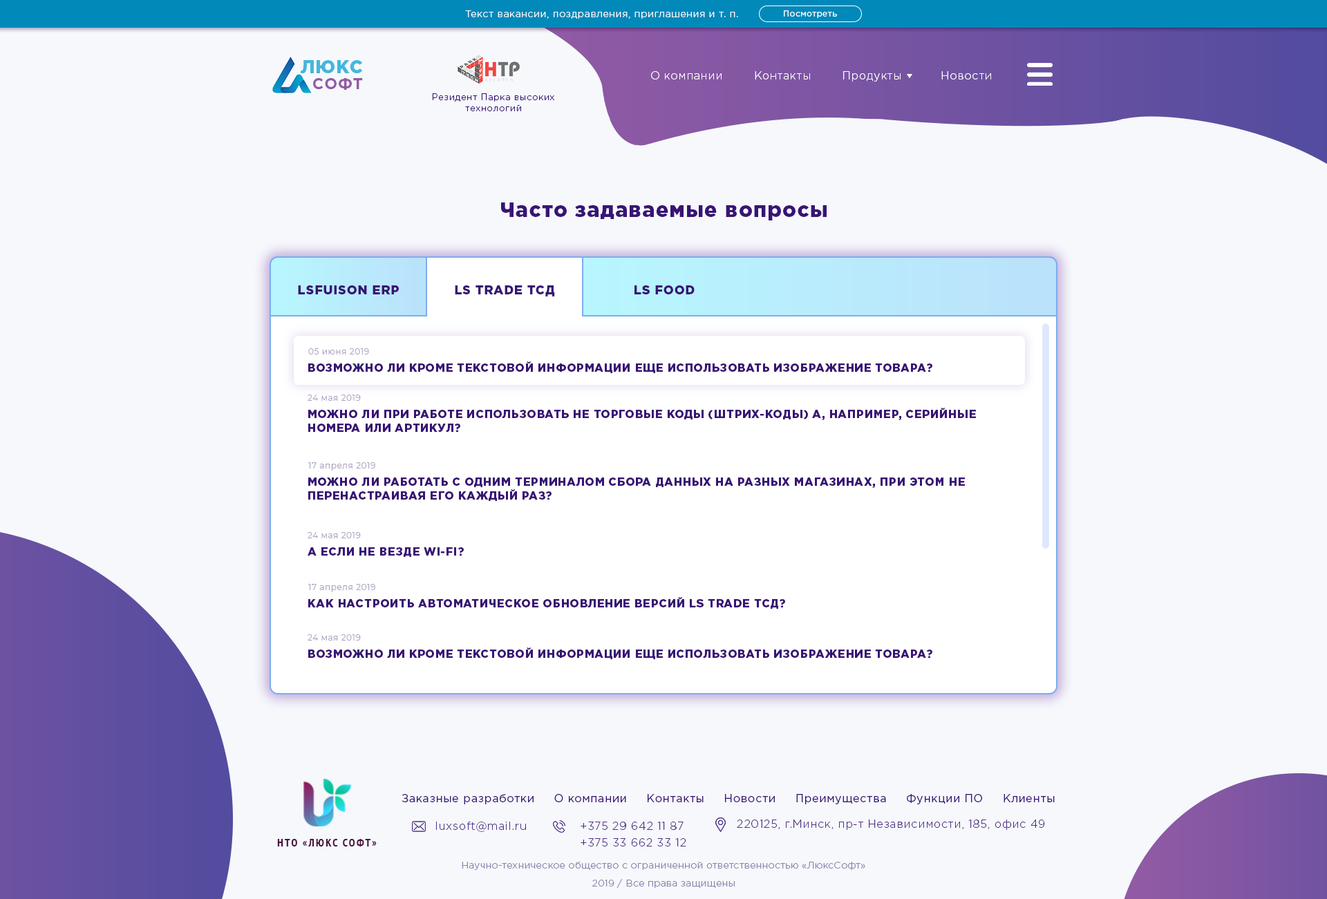
<style>
.page{position:relative;width:1327px;height:899px;background:#f6f8fc}
.page>*{position:absolute;margin:0}
.t1{font:9.7px "GothamPro-Light";letter-spacing:0.05em;color:#ffffff}
.t2{font:8.3px "GothamPro";letter-spacing:0.05em;color:#fefeff}
.t3{font:18.3px/16.3px "GothamPro-Black";letter-spacing:0.05em;color:#44b6de;text-transform:uppercase}
.t4{font:15.6px/16.3px "GothamPro-Bold";letter-spacing:0.05em;color:#935aa5;text-transform:uppercase}
.t5{font:11.1px "GothamPro-Light";letter-spacing:0.05em;color:#ffffff}
.t6{font:9px "GothamPro-Light";letter-spacing:0.05em;color:#381474}
.t7{font:20.7px "GothamPro-Black";letter-spacing:0.05em;color:#381474}
.t8{font:12.4px "GothamPro-Black";letter-spacing:0.05em;color:#381474;text-transform:uppercase}
.t9{font:8.3px "Montserrat-Regular";letter-spacing:0.05em;color:#aaa2be}
.t10{font:8.3px "Montserrat-Regular";letter-spacing:0.05em;color:#aaa2be;text-transform:uppercase}
.t11{font:11.1px "GothamPro-Black";letter-spacing:0.05em;color:#381474;text-transform:uppercase}
.t12{font:11.1px/13.8px "GothamPro-Black";letter-spacing:0.05em;color:#381474;text-transform:uppercase}
.t13{font:11.1px "GothamPro";letter-spacing:0.05em;color:#381474}
.t14{font:11.1px "GothamPro-Light";letter-spacing:0.05em;color:#4f3085}
.t15{font:11.1px "PTSans-NarrowBold";letter-spacing:0.14em;color:#491240;text-transform:uppercase}
.t16{font:9.7px "GothamPro-Light";letter-spacing:0.02em;color:#8d82ab}
</style>
<div class="page">
<p class="t1" style="left:465px;top:10px;width:273px;height:9px">Текст вакансии, поздравления, приглашения и т. п.</p>
<p class="t2" style="left:784px;top:10px;width:53px;height:8px">Посмотреть</p>
<p class="t3" style="left:301px;top:60px;width:62px;height:30px">Люкс<br>  <span class="t4">софт</span></p>
<p class="t5" style="left:651px;top:71px;width:340px;height:11px">О компании        Контакты        Продукты          Новости</p>
<p class="t6" style="left:432px;top:93px;width:122px;height:18px;text-align:center">Резидент Парка высоких<br>технологий</p>
<p class="t7" style="left:501px;top:202px;width:325px;height:18px">Часто задаваемые вопросы</p>
<p class="t8" style="left:298px;top:285px;width:101px;height:9px">lsfuison erp</p>
<p class="t8" style="left:455px;top:285px;width:100px;height:11px">ls trade тсд</p>
<p class="t8" style="left:634px;top:285px;width:60px;height:9px">ls food</p>
<p class="t9" style="left:308px;top:348px;width:61px;height:6px"><span class="t10">05 </span>июня 2019</p>
<p class="t11" style="left:308px;top:361px;width:624px;height:12px">Возможно ли кроме текстовой информации еще использовать изображение товара?</p>
<p class="t9" style="left:307px;top:395px;width:54px;height:6px"><span class="t10">24 </span>мая 2019</p>
<p class="t12" style="left:308px;top:408px;width:668px;height:24px">Можно ли при работе использовать не торговые коды (штрих-коды) а, например, серийные<br>номера или артикул?</p>
<p class="t9" style="left:308px;top:462px;width:67px;height:9px"><span class="t10">17 </span>апреля 2019</p>
<p class="t12" style="left:308px;top:477px;width:657px;height:24px">Можно ли работать с одним терминалом сбора данных на разных магазинах, при этом не<br>перенастраивая его каждый раз?</p>
<p class="t9" style="left:307px;top:532px;width:54px;height:6px"><span class="t10">24 </span>мая 2019</p>
<p class="t11" style="left:307px;top:547px;width:157px;height:10px">А если не везде Wi-Fi?</p>
<p class="t9" style="left:308px;top:584px;width:67px;height:8px"><span class="t10">17 </span>апреля 2019</p>
<p class="t11" style="left:308px;top:597px;width:477px;height:12px">Как настроить автоматическое обновление версий LS Trade ТСД?</p>
<p class="t9" style="left:307px;top:634px;width:54px;height:6px"><span class="t10">24 </span>мая 2019</p>
<p class="t11" style="left:308px;top:647px;width:624px;height:12px">Возможно ли кроме текстовой информации еще использовать изображение товара?</p>
<p class="t13" style="left:401px;top:794px;width:653px;height:10px">Заказные разработки     О компании     Контакты     Новости     Преимущества     Функции ПО     Клиенты</p>
<p class="t14" style="left:436px;top:822px;width:90px;height:10px">luxsoft@mail.ru</p>
<p class="t14" style="left:580px;top:822px;width:103px;height:8px">+375 29 642 11 87</p>
<p class="t14" style="left:737px;top:819px;width:308px;height:11px">220125, г.Минск, пр-т Независимости, 185, офис 49</p>
<p class="t15" style="left:277px;top:839px;width:100px;height:7px">НТО «Люкс Софт»</p>
<p class="t14" style="left:580px;top:838px;width:106px;height:8px">+375 33 662 33 12</p>
<p class="t16" style="left:462px;top:862px;width:403px;height:8px">Научно-техническое общество с ограниченной ответственностью «ЛюксСофт»</p>
<p class="t16" style="left:592px;top:879px;width:142px;height:9px">2019 / Все права защищены</p>
</div>
